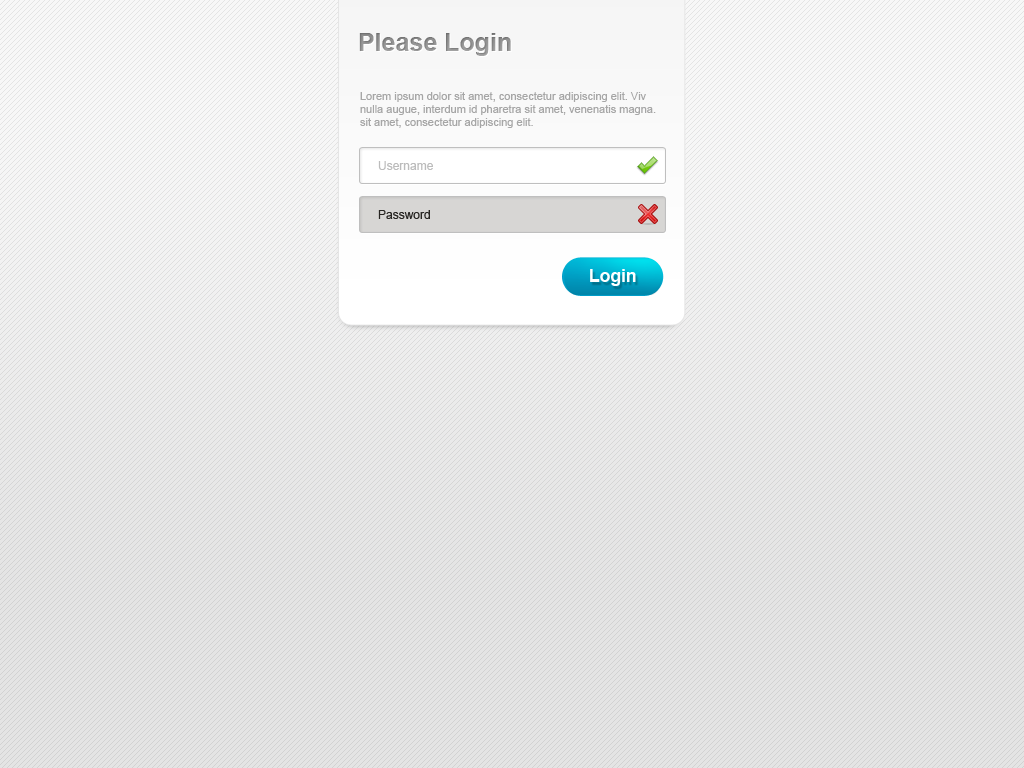
<style>
.page{position:relative;width:1024px;height:768px;background:#e4e4e4}
.page>*{position:absolute;margin:0}
.t1{font:25px "Arial-BoldMT";color:#8f8f8f}
.t2{font:11px "ArialMT";color:#a6a6a6}
.t3{font:12px "ArialMT";color:#bcbcbc}
.t4{font:12px "ArialMT";color:#282623}
</style>
<div class="page">
<p class="t1" style="left:359px;top:33px;width:152px;height:23px">Please Login</p>
<p class="t2" style="left:360px;top:92px;width:296px;height:36px">Lorem ipsum dolor sit amet, consectetur adipiscing elit. Viv nulla augue, interdum id pharetra sit amet, venenatis magna. sit amet, consectetur adipiscing elit.</p>
<p class="t3" style="left:378px;top:161px;width:55px;height:9px">Username</p>
<p class="t4" style="left:378px;top:210px;width:52px;height:9px">Password</p>
</div>
